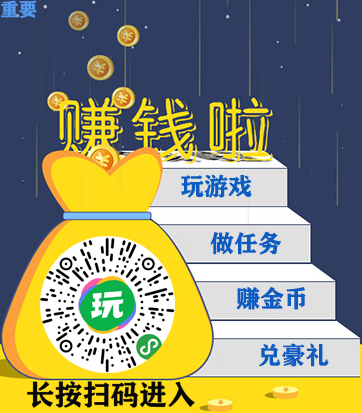
<style>
.page{position:relative;width:362px;height:413px;background:#2f3d60}
.page>*{position:absolute;margin:0}
.t1{font:18.3px "FZCHSJW--GB1-0";color:#5399f0}
.t2{font:24px "FZCHSJW--GB1-0";color:#0c5dc2}
</style>
<div class="page">
<p class="t1" style="left:1px;top:0px;width:36px;height:18px">重要</p>
<p class="t2" style="left:210px;top:231px;width:72px;height:24px">做任务</p>
<p class="t2" style="left:236px;top:286px;width:70px;height:24px">赚金币</p>
<p class="t2" style="left:259px;top:343px;width:70px;height:24px">兑豪礼</p>
</div>
